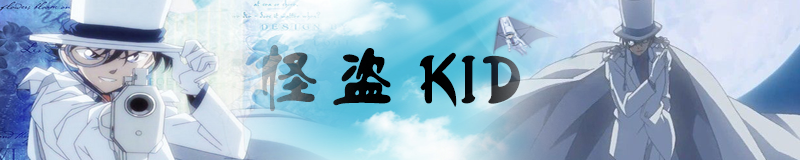
<style>
.page{position:relative;width:800px;height:160px}
.page>*{position:absolute;margin:0}
.t1{font:72px "FZLXTJW--GB1-0";font-weight:bold}
</style>
<div class="page">
<p class="t1" style="left:262px;top:44px;width:259px;height:68px">怪盗 KID</p>
</div>
